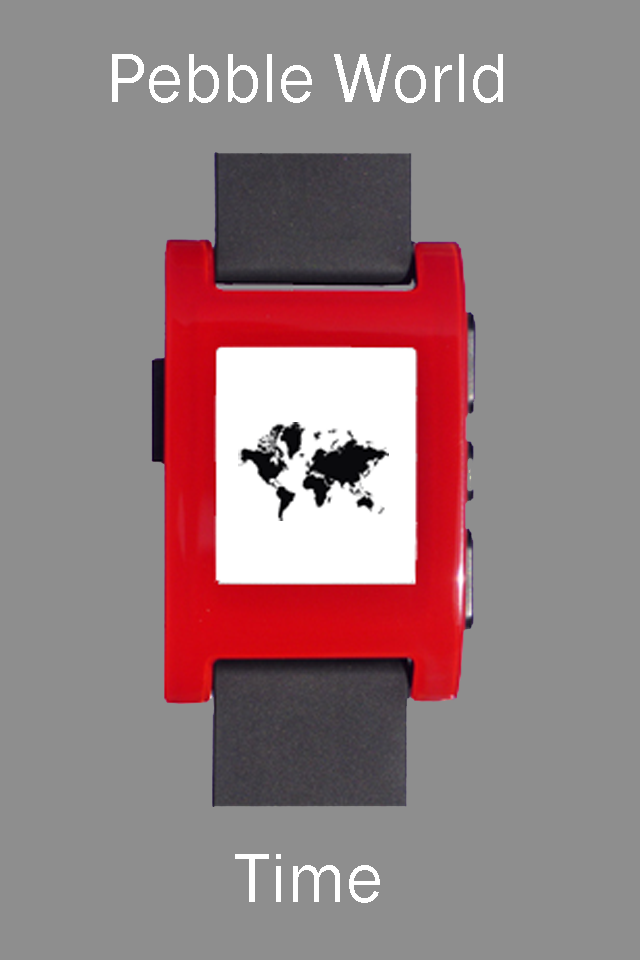
<style>
.page{position:relative;width:640px;height:960px;background:#8e8e8e}
.page>*{position:absolute;margin:0}
.t1{font:72px "FranklinGothic-Book";color:#ffffff}
</style>
<div class="page">
<p class="t1" style="left:112px;top:54px;width:391px;height:49px">Pebble World</p>
<p class="t1" style="left:235px;top:854px;width:145px;height:49px">Time</p>
</div>
